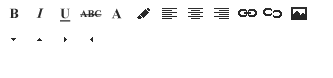
<style>
.page{position:relative;width:333px;height:78px;background:#ffffff}
.page>*{position:absolute;margin:0}
.t1{font:14px "TimesNewRomanPS-BoldMT";color:#282828}
.t2{font:14px "TimesNewRomanPS-BoldItalicMT";color:#292929}
.t3{font:14px "TimesNewRomanPS-BoldMT";color:#2a2a2a;text-decoration:underline}
.t4{font:10px "TimesNewRomanPS-BoldMT";color:#282828;text-transform:uppercase}
.t5{font:14px "TimesNewRomanPS-BoldMT";color:#282828;text-transform:uppercase}
</style>
<div class="page">
<p class="t1" style="left:9px;top:8px;width:10px;height:10px">B</p>
<p class="t2" style="left:36px;top:8px;width:8px;height:10px">I</p>
<p class="t3" style="left:60px;top:8px;width:11px;height:14px">U</p>
<p class="t4" style="left:80px;top:10px;width:22px;height:7px">abc</p>
<p class="t5" style="left:111px;top:8px;width:11px;height:11px">A</p>
</div>
